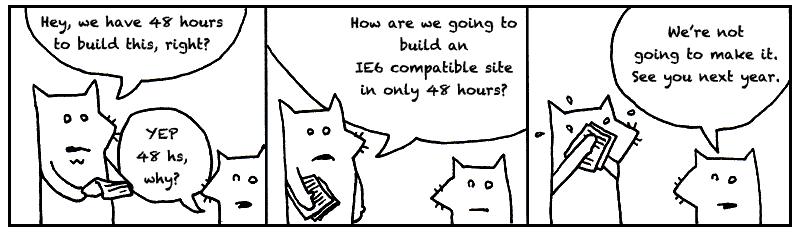
<style>
.page{position:relative;width:800px;height:232px;background:#ffffff}
.page>*{position:absolute;margin:0}
.t1{font:13.9px/22.3px "Chalkduster";letter-spacing:0.01em;color:#000000}
</style>
<div class="page">
<p class="t1" style="left:41px;top:15px;width:182px;height:39px;text-align:center">Hey, we have 48 hours<br>to build this, right?</p>
<p class="t1" style="left:351px;top:16px;width:166px;height:87px;text-align:center">How are we going to<br>build an<br>IE6 compatible site<br>in only 48 hours?</p>
<p class="t1" style="left:632px;top:24px;width:148px;height:65px;text-align:center">We’re not<br>going to make it.<br>See you next year.</p>
<p class="t1" style="left:136px;top:127px;width:51px;height:64px;text-align:center">YEP<br>48 hs,<br>why?</p>
</div>
